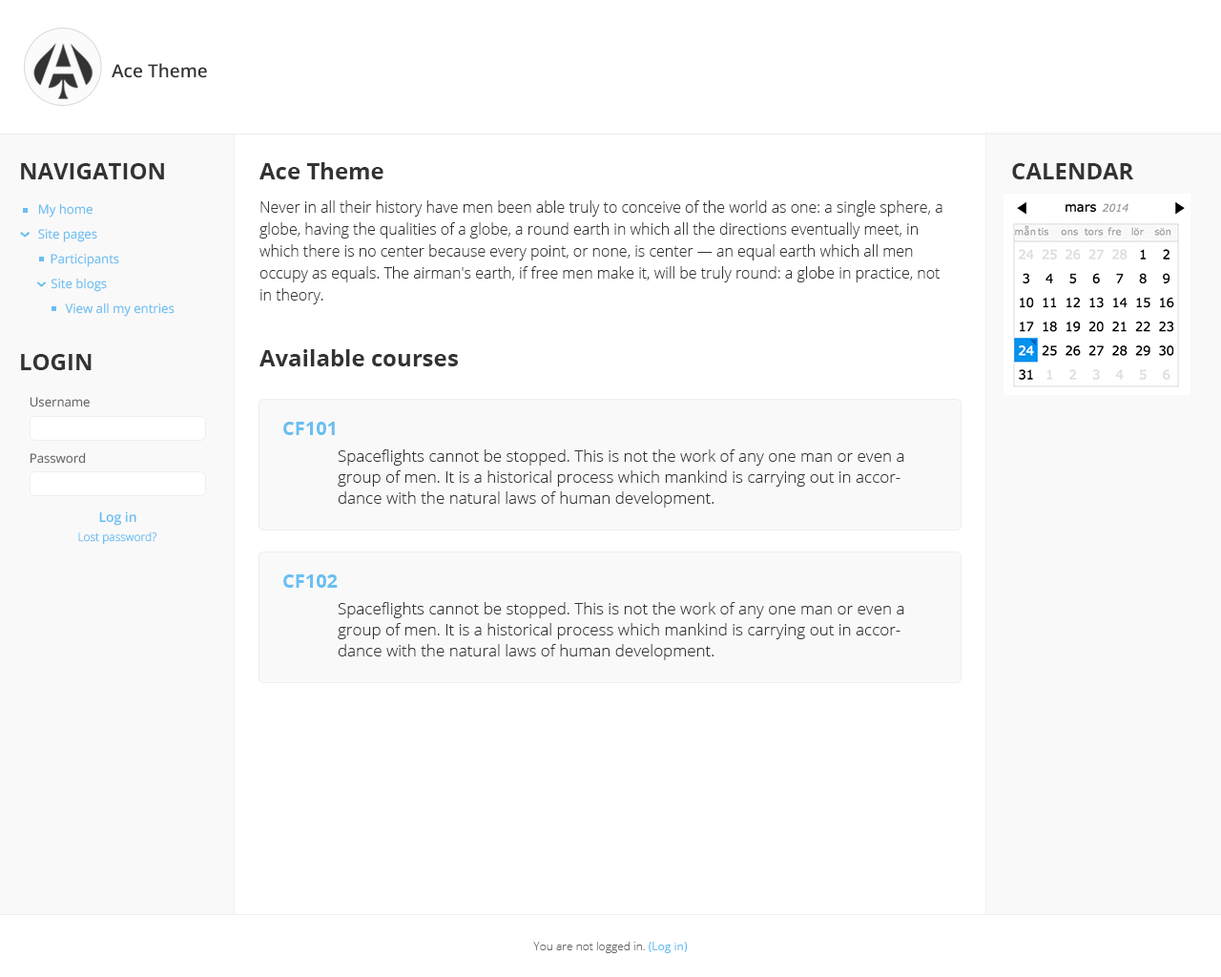
<style>
.page{position:relative;width:1221px;height:977px;background:#ffffff}
.page>*{position:absolute;margin:0}
.t1{font:18.2px "OpenSans-Semibold";color:#333333}
.t2{font:22.9px "OpenSans-Bold";color:#333333}
.t3{font:12.6px "OpenSans";color:#69bff1}
.t4{font:15.3px/21.9px "OpenSans-Light";color:#333333}
.t5{font:12.6px "OpenSans";color:#666666}
.t6{font:19.1px "OpenSans-Bold";color:#69bff1}
.t7{font:16.2px/21px "OpenSans-Light";color:#333333}
.t8{font:13.4px "OpenSans-Semibold";color:#69bff1}
.t9{font:11.4px "OpenSans-Light";color:#69bff1}
.t10{font:11.4px "OpenSans-Light";color:#666666}
.t11{font:11.4px "OpenSans";color:#69bff1}
</style>
<div class="page">
<p class="t1" style="left:112px;top:63px;width:95px;height:15px">Ace Theme</p>
<p class="t2" style="left:21px;top:163px;width:143px;height:16px">NAVIGATION</p>
<p class="t2" style="left:259px;top:162px;width:124px;height:17px">Ace Theme</p>
<p class="t2" style="left:1012px;top:163px;width:122px;height:16px">CALENDAR</p>
<p class="t3" style="left:38px;top:203px;width:55px;height:14px">My home</p>
<p class="t4" style="left:259px;top:200px;width:683px;height:104px">Never in all their history have men been able truly to conceive of the world as one: a single sphere, a globe, having the qualities of a globe, a round earth in which all the directions eventually meet, in which there is no center because every point, or none, is center — an equal earth which all men occupy as equals. The airman's earth, if free men make it, will be truly round: a globe in practice, not in theory.</p>
<p class="t3" style="left:38px;top:229px;width:59px;height:13px">Site pages</p>
<p class="t3" style="left:51px;top:254px;width:68px;height:13px">Participants</p>
<p class="t3" style="left:51px;top:278px;width:56px;height:14px">Site blogs</p>
<p class="t3" style="left:65px;top:302px;width:110px;height:15px">View all my entries</p>
<p class="t2" style="left:21px;top:354px;width:71px;height:16px">LOGIN</p>
<p class="t2" style="left:259px;top:349px;width:199px;height:17px">Available courses</p>
<p class="t5" style="left:30px;top:397px;width:60px;height:10px">Username</p>
<p class="t6" style="left:283px;top:422px;width:52px;height:13px">CF101</p>
<p class="t7" style="left:338px;top:449px;width:566px;height:58px">Spaceflights cannot be stopped. This is not the work of any one man or even a group of men. It is a historical process which mankind is carrying out in accordance with the natural laws of human development.</p>
<p class="t5" style="left:30px;top:452px;width:56px;height:12px">Password</p>
<p class="t8" style="left:99px;top:511px;width:37px;height:15px">Log in</p>
<p class="t9" style="left:78px;top:531px;width:78px;height:14px">Lost password?</p>
<p class="t6" style="left:283px;top:574px;width:55px;height:14px">CF102</p>
<p class="t7" style="left:338px;top:602px;width:566px;height:58px">Spaceflights cannot be stopped. This is not the work of any one man or even a group of men. It is a historical process which mankind is carrying out in accordance with the natural laws of human development.</p>
<p class="t10" style="left:533px;top:941px;width:155px;height:12px">You are not logged in. <span class="t11">(Log in)</span></p>
</div>
